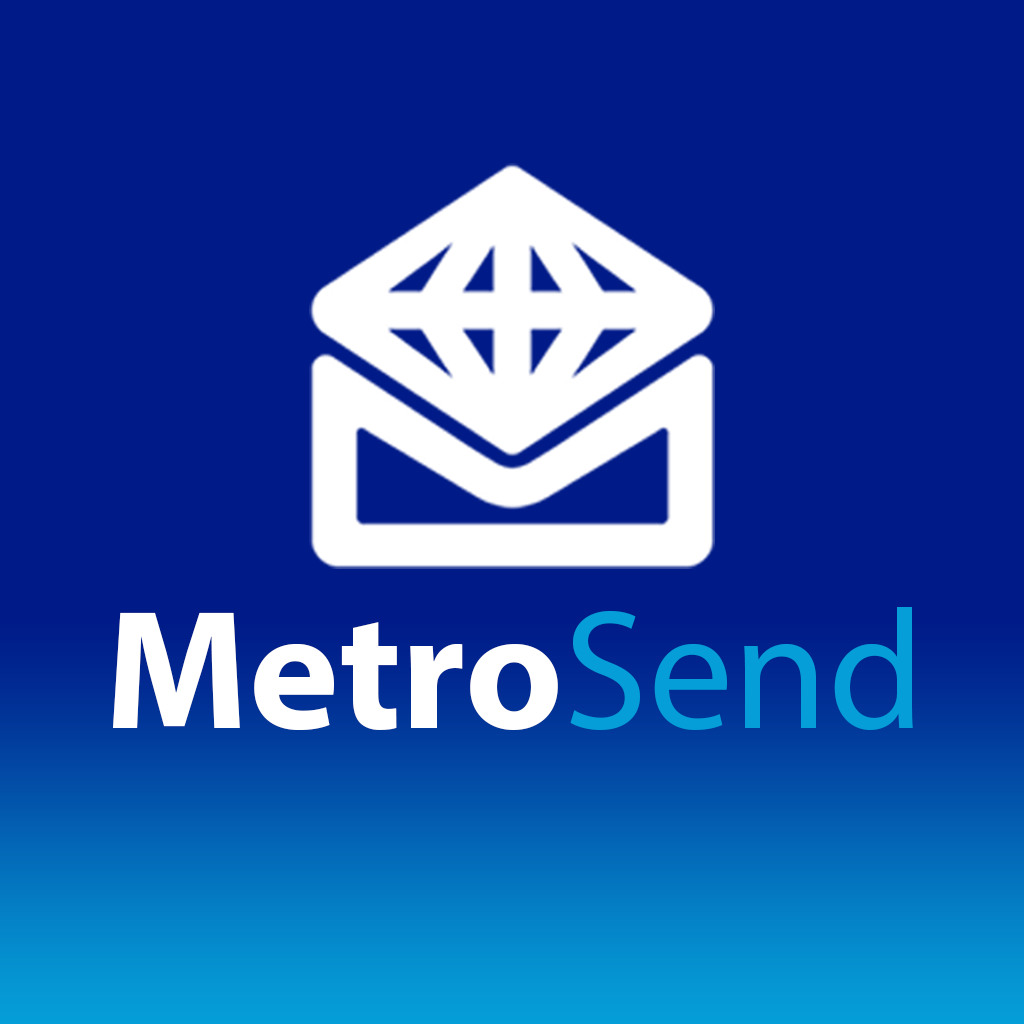
<style>
.page{position:relative;width:1024px;height:1024px;background:#001a88}
.page>*{position:absolute;margin:0}
.t1{font:170px "MyriadPro-Bold";color:#ffffff}
.t2{font:170px "MyriadPro-Regular";color:#059ed8}
</style>
<div class="page">
<p class="t1" style="left:113px;top:607px;width:800px;height:123px">Metro<span class="t2">Send</span></p>
</div>
